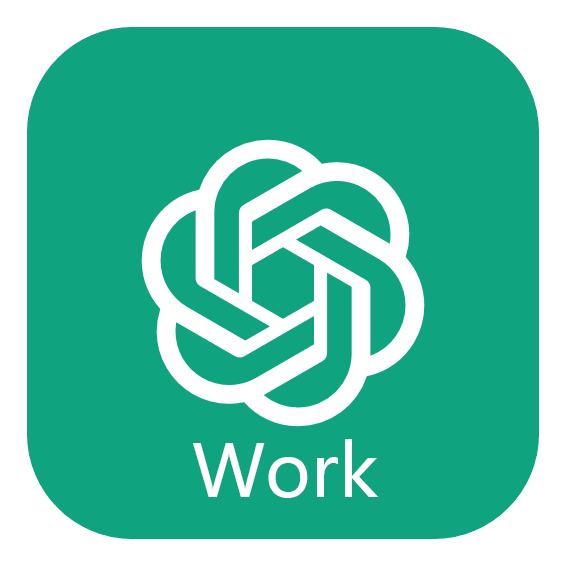
<style>
.page{position:relative;width:567px;height:567px;background:#10a37f}
.page>*{position:absolute;margin:0}
.t1{font:72px "MicrosoftYaHei";color:#ffffff}
</style>
<div class="page">
<p class="t1" style="left:193px;top:439px;width:186px;height:59px">Work</p>
</div>
